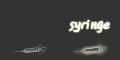
<style>
.page{position:relative;width:120px;height:60px;background:#333333}
.page>*{position:absolute;margin:0}
.t1{font:14px "PolyhedralLCBB";color:#ffffff}
</style>
<div class="page">
<p class="t1" style="left:69px;top:20px;width:41px;height:13px">syringe</p>
</div>
